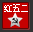
<style>
.page{position:relative;width:33px;height:32px;background:#c50000}
.page>*{position:absolute;margin:0}
.t1{font:10.4px "SimSun";letter-spacing:-0.25em;color:#ffffff}
</style>
<div class="page">
<p class="t1" style="left:4px;top:4px;width:24px;height:8px">红五二</p>
</div>
